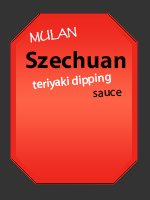
<style>
.page{position:relative;width:150px;height:200px;background:#333333}
.page>*{position:absolute;margin:0}
.t1{font:10px "Papyrus-Regular";color:#ffffff}
.t2{font:24px "MyriadPro-Bold";color:#010101}
.t3{font:12px "MyriadPro-Regular";color:#ffffff}
.t4{font:12px "MyriadPro-Regular";color:#000000}
</style>
<div class="page">
<p class="t1" style="left:29px;top:27px;width:48px;height:16px;rotate:-7deg">MULAN</p>
<p class="t2" style="left:26px;top:51px;width:100px;height:18px">Szechuan</p>
<p class="t3" style="left:32px;top:73px;width:79px;height:17px;rotate:-6deg">teriyaki dipping</p>
<p class="t4" style="left:93px;top:89px;width:29px;height:9px;rotate:-3deg">sauce</p>
</div>
